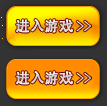
<style>
.page{position:relative;width:107px;height:106px}
.page>*{position:absolute;margin:0}
.t1{font:14px "AdobeHeitiStd-Regular";color:#d7d7d7;font-weight:bold}
.t2{font:14px "-";color:#d7d7d7;font-weight:bold;scale:0.65 1}
</style>
<div class="page">
<p class="t1" style="left:16px;top:19px;width:76px;height:14px">进入游戏 <span class="t2">&gt;&gt;</span></p>
<p class="t1" style="left:16px;top:71px;width:76px;height:14px">进入游戏 <span class="t2">&gt;&gt;</span></p>
</div>
